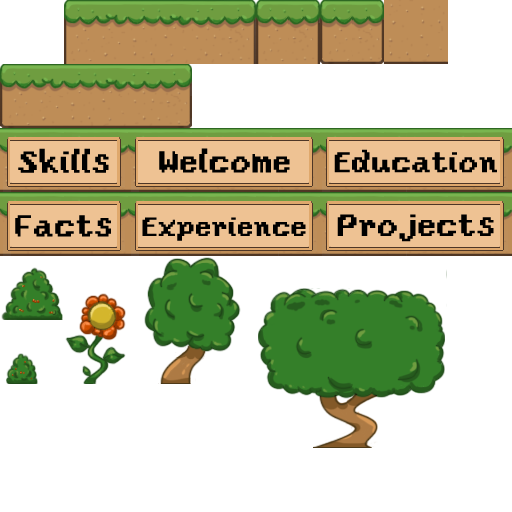
<style>
.page{position:relative;width:512px;height:512px;background:#ffffff}
.page>*{position:absolute;margin:0}
.t1{font:32px "YosterIslandReg";color:#000000}
.t2{font:30px "YosterIslandReg";color:#000000}
.t3{font:28px "YosterIslandReg";color:#000000}
.t4{font:32.3px "YosterIslandReg";color:#000000}
</style>
<div class="page">
<p class="t1" style="left:18px;top:148px;width:91px;height:25px">Skills</p>
<p class="t1" style="left:159px;top:148px;width:131px;height:25px">Welcome</p>
<p class="t2" style="left:334px;top:149px;width:163px;height:24px">Education</p>
<p class="t1" style="left:15px;top:215px;width:96px;height:22px">Facts</p>
<p class="t3" style="left:142px;top:217px;width:164px;height:24px">Experience</p>
<p class="t4" style="left:337px;top:214px;width:157px;height:28px">Projects</p>
</div>
